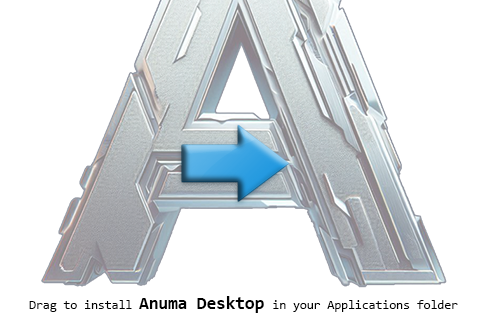
<style>
.page{position:relative;width:485px;height:330px;background:#ffffff}
.page>*{position:absolute;margin:0}
.t1{font:12.5px "Consolas";color:#000000}
.t2{font:17.5px "Consolas-Bold";color:#000000}
</style>
<div class="page">
<p class="t1" style="left:29px;top:296px;width:429px;height:17px">Drag to install <span class="t2">Anuma Desktop </span>in your Applications folder</p>
</div>
